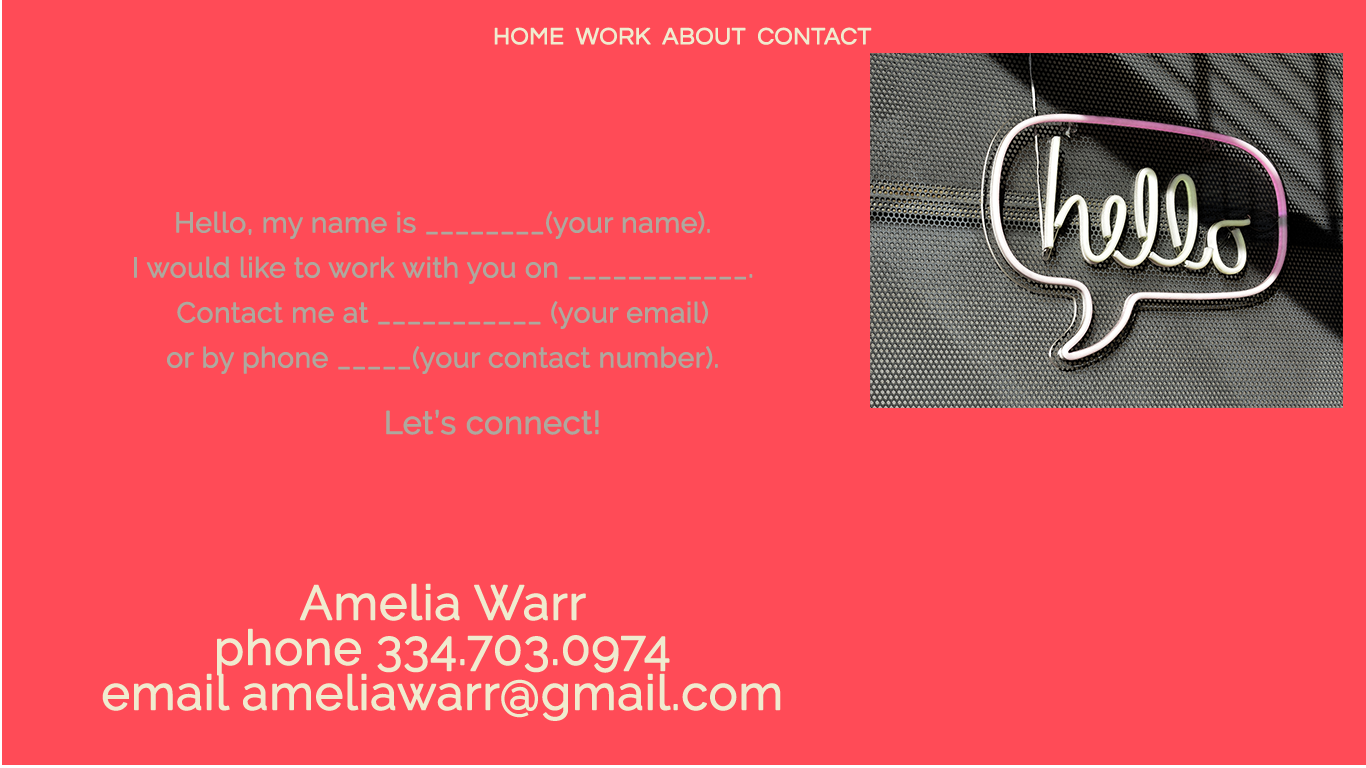
<style>
.page{position:relative;width:1366px;height:768px;background:#ff4b57}
.page>*{position:absolute;margin:0}
.t1{font:24px "Questrial-Regular";color:#f0ebcf;text-transform:uppercase;font-weight:bold}
.t2{font:28px/45px "Raleway-Regular";color:#aea89e;font-weight:bold}
.t3{font:32px "Raleway-Regular";color:#aea89e;font-weight:bold}
.t4{font:48px/45px "Raleway-Regular";color:#f0ebcf;font-weight:bold}
</style>
<div class="page">
<p class="t1" style="left:494px;top:27px;width:378px;height:18px">HOME  WORK  ABOUT  CONTACT</p>
<p class="t2" style="left:134px;top:211px;width:619px;height:163px;text-align:center">Hello, my name is ________(your name).<br>I would like to work with you on ____________.<br>Contact me at ___________ (your email)<br>or by phone _____(your contact number).</p>
<p class="t3" style="left:386px;top:409px;width:213px;height:26px">Let’s connect!</p>
<p class="t4" style="left:102px;top:583px;width:679px;height:138px;text-align:center">Amelia Warr<br>phone 334.703.0974<br>email ameliawarr@gmail.com</p>
</div>
